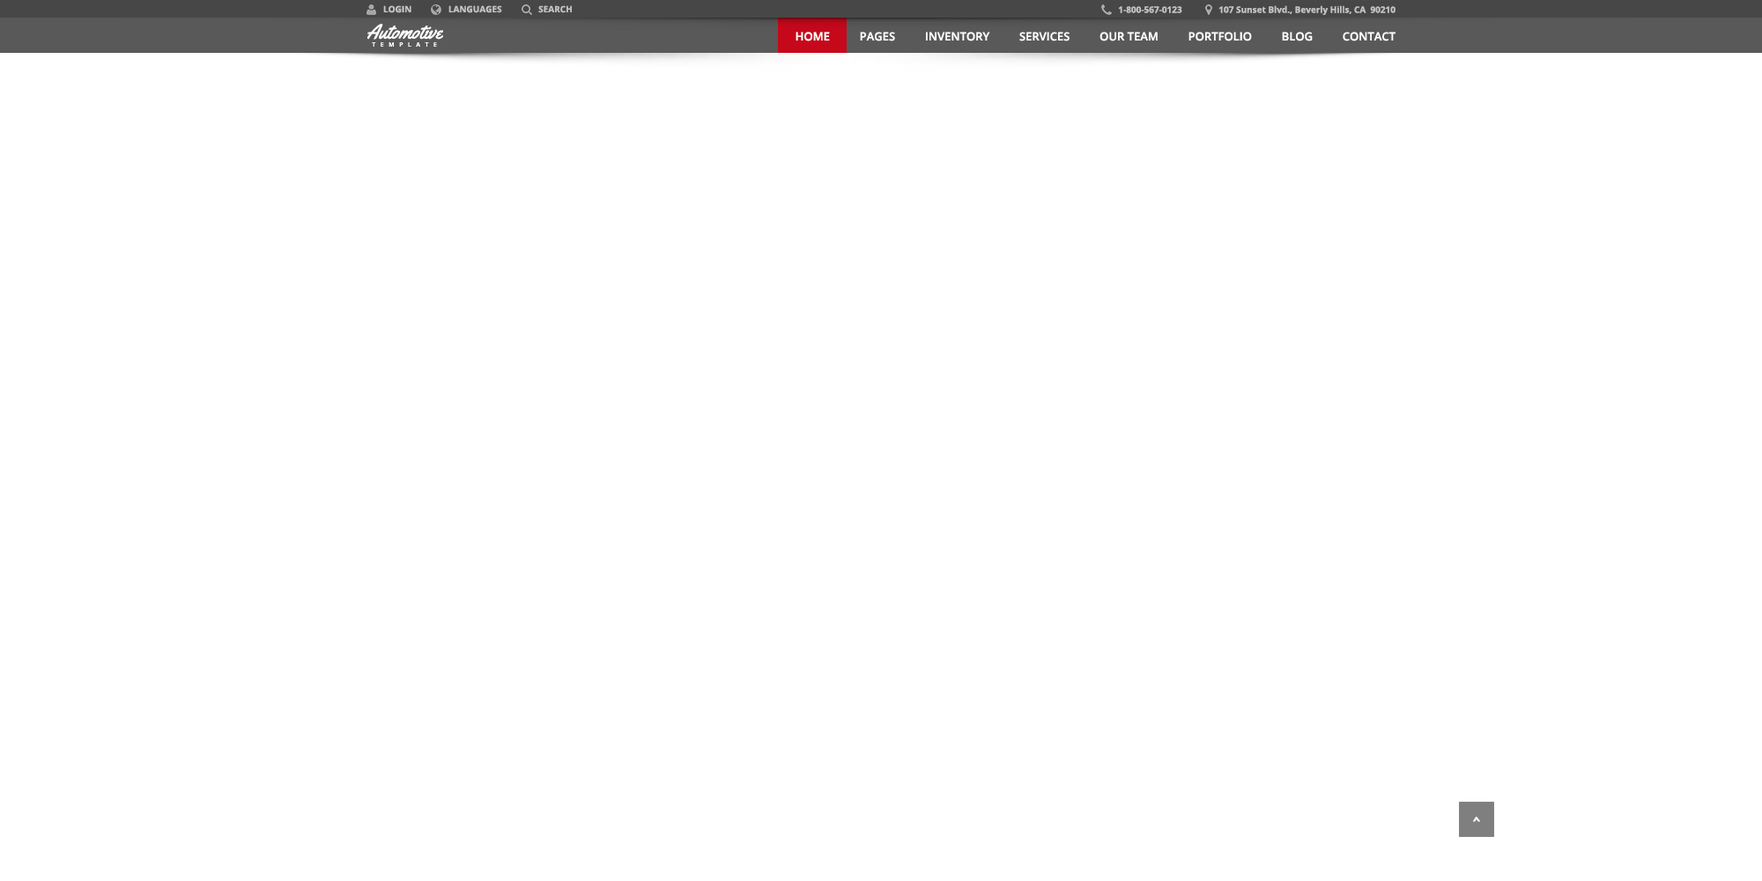
<style>
.page{position:relative;width:1762px;height:881px;background:#ffffff}
.page>*{position:absolute;margin:0}
.t1{font:8.8px "OpenSans-Bold";color:#c3c3c3}
.t2{font:20.4px "Yellowtail";color:#ffffff}
.t3{font:11.5px "OpenSans-Semibold";color:#ffffff}
.t4{font:6.1px "OpenSans-Semibold";color:#ffffff}
.t5{font:9.2px "OpenSans-Extrabold";color:#ffffff;scale:1.4 1}
</style>
<div class="page">
<p class="t1" style="left:383px;top:5px;width:189px;height:8px">LOGIN                LANGUAGES                SEARCH</p>
<p class="t1" style="left:1118px;top:5px;width:277px;height:10px">1-800-567-0123                107 Sunset Blvd., Beverly Hills, CA  90210</p>
<p class="t2" style="left:367px;top:23px;width:76px;height:17px">Automotive</p>
<p class="t3" style="left:795px;top:32px;width:600px;height:9px">HOME          PAGES          INVENTORY          SERVICES          OUR TEAM          PORTFOLIO          BLOG          CONTACT</p>
<p class="t4" style="left:372px;top:42px;width:65px;height:5px">T   E   M   P   L   A   T   E</p>
<p class="t5" style="left:1473px;top:817px;width:7px;height:5px">^</p>
</div>
